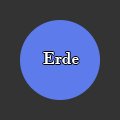
<style>
.page{position:relative;width:120px;height:120px;background:#333333}
.page>*{position:absolute;margin:0}
.t1{font:18px "BodoniMT";color:#ffffff}
</style>
<div class="page">
<p class="t1" style="left:43px;top:52px;width:36px;height:12px">Erde</p>
</div>
